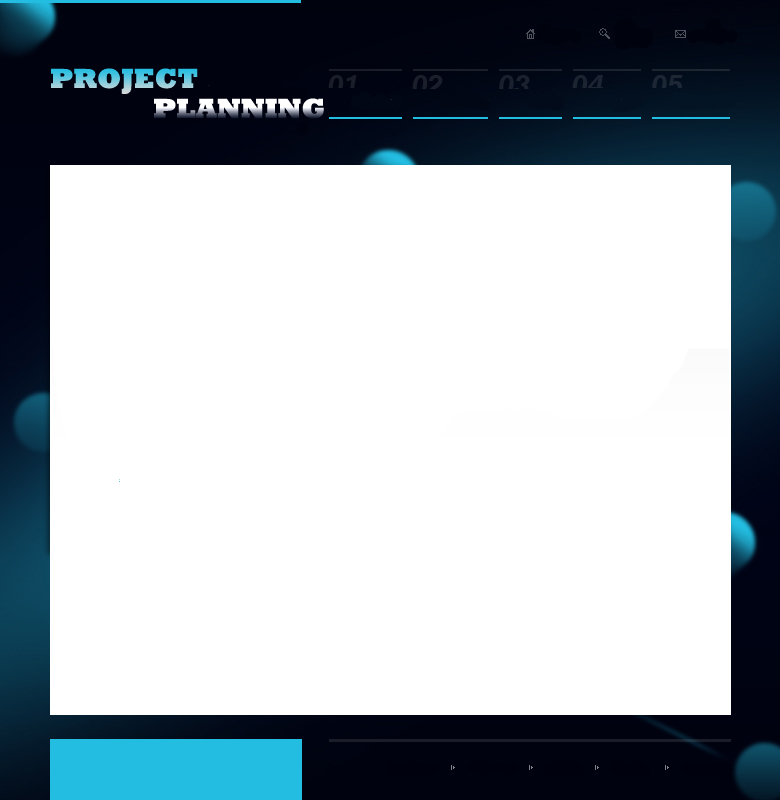
<style>
.page{position:relative;width:780px;height:800px;background:#ffffff}
.page>*{position:absolute;margin:0}
.t1{font:28px "Rockwell-ExtraBold";text-transform:uppercase}
</style>
<div class="page">
<p class="t1" style="left:51px;top:68px;width:147px;height:26px">Project</p>
<p class="t1" style="left:154px;top:98px;width:170px;height:21px">Planning</p>
</div>
